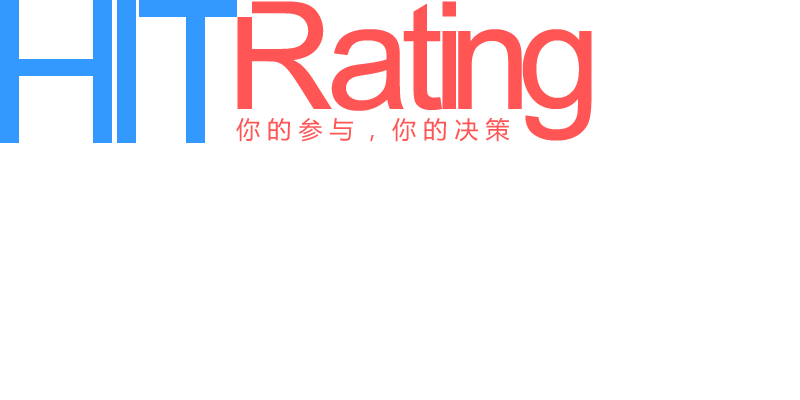
<style>
.page{position:relative;width:800px;height:400px;background:#ffffff}
.page>*{position:absolute;margin:0}
.t1{font:200px "ArialMT";letter-spacing:-0.01em;color:#3399ff}
.t2{font:150px "ArialMT";letter-spacing:-0.01em;color:#ff5555}
.t3{font:24px "MicrosoftYaHei";letter-spacing:0.3em;color:#ff5555}
</style>
<div class="page">
<p class="t1" style="left:0px;top:0px;width:252px;height:143px">HIT</p>
<p class="t2" style="left:237px;top:1px;width:355px;height:140px">Rating</p>
<p class="t3" style="left:236px;top:118px;width:274px;height:24px">你的参与，你的决策</p>
</div>
